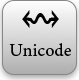
<style>
.page{position:relative;width:79px;height:80px}
.page>*{position:absolute;margin:0}
.t1{font:60px "AppleSymbols";color:#000000}
.t2{font:18px "MinionPro-Regular";color:#000000}
</style>
<div class="page">
<p class="t1" style="left:22px;top:10px;width:37px;height:18px">↭</p>
<p class="t2" style="left:9px;top:43px;width:62px;height:13px">Unicode</p>
</div>
